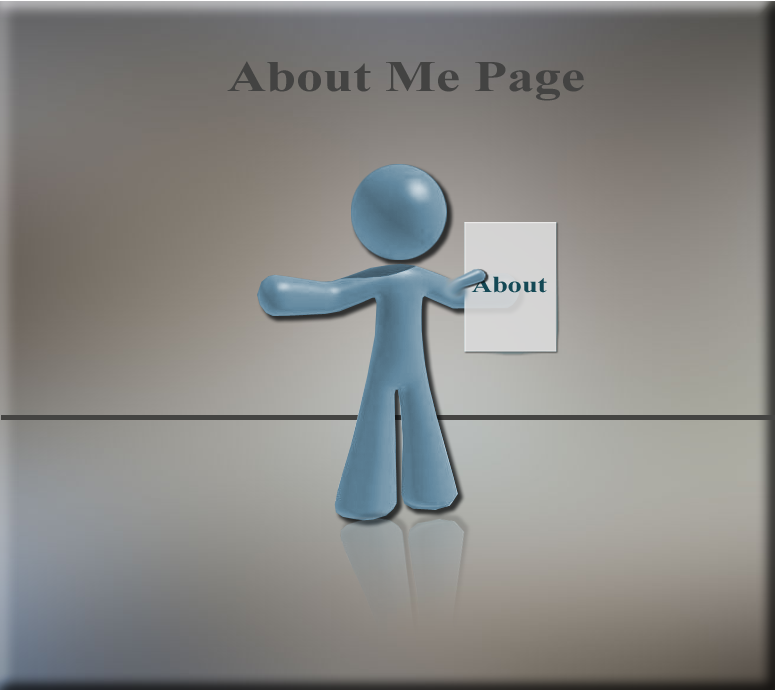
<style>
.page{position:relative;width:775px;height:690px}
.page>*{position:absolute;margin:0}
.t1{font:44px "TimesNewRomanPS-BoldMT";color:#434342;scale:1.23 1}
.t2{font:23px "TimesNewRomanPS-BoldMT";color:#144855;scale:1.23 1}
</style>
<div class="page">
<p class="t1" style="left:227px;top:61px;width:357px;height:40px">About Me Page</p>
<p class="t2" style="left:471px;top:276px;width:76px;height:17px">About</p>
</div>
